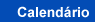
<style>
.page{position:relative;width:95px;height:22px;background:#034cb5}
.page>*{position:absolute;margin:0}
.t1{font:14px "Arial-BoldMT";color:#ffffff}
</style>
<div class="page">
<p class="t1" style="left:17px;top:6px;width:72px;height:12px">Calendário</p>
</div>
